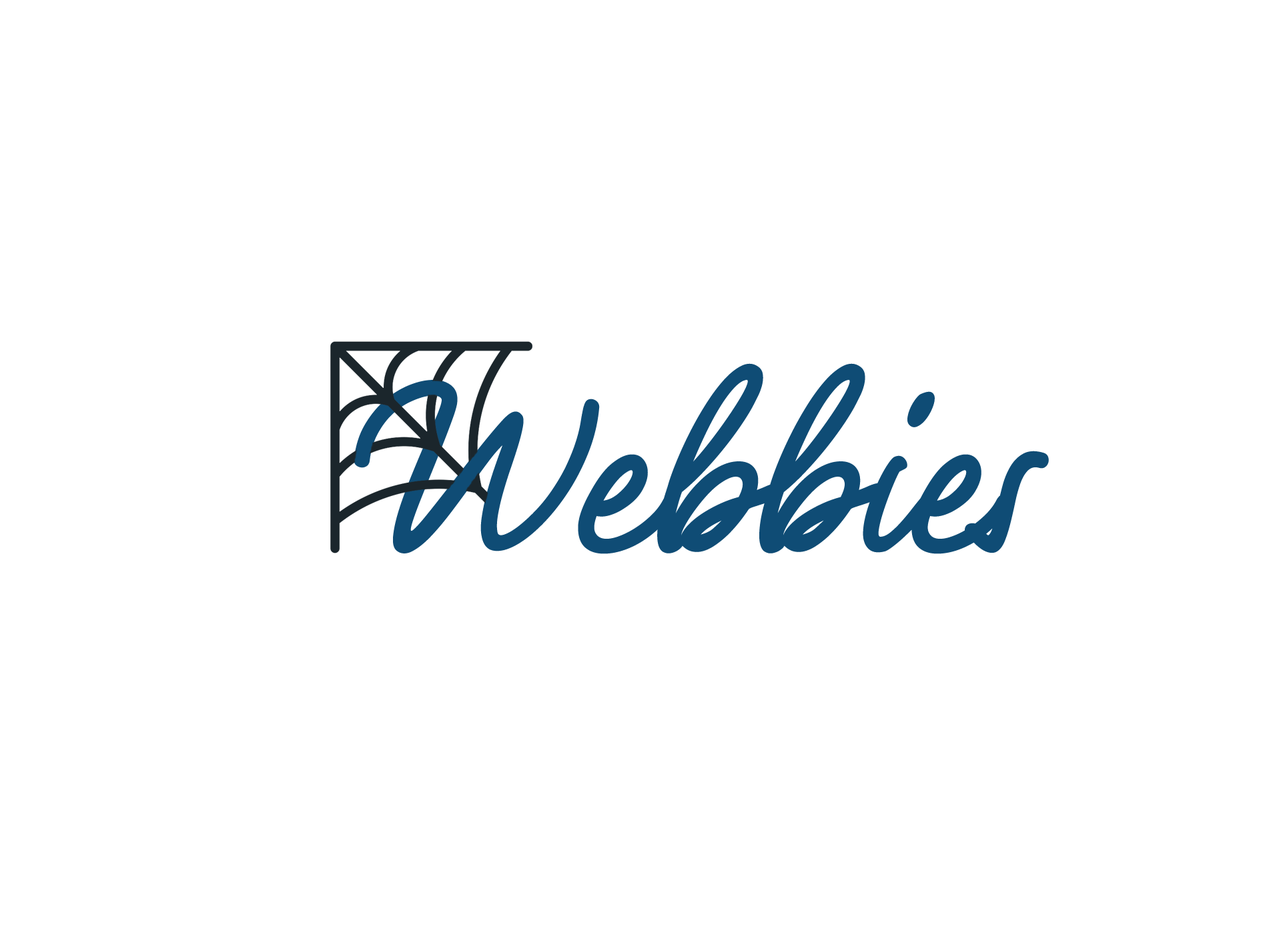
<style>
.page{position:relative;width:1261px;height:946px;background:#ffffff}
.page>*{position:absolute;margin:0}
.t1{font:257.6px "Mellodious";color:#0f4c75}
</style>
<div class="page">
<p class="t1" style="left:354px;top:363px;width:695px;height:191px">Webbies</p>
</div>
